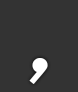
<style>
.page{position:relative;width:78px;height:92px;background:#333333}
.page>*{position:absolute;margin:0}
.t1{font:109.6px "ProductSans-Italic";color:#ffffff}
</style>
<div class="page">
<p class="t1" style="left:29px;top:58px;width:19px;height:26px">,</p>
</div>
